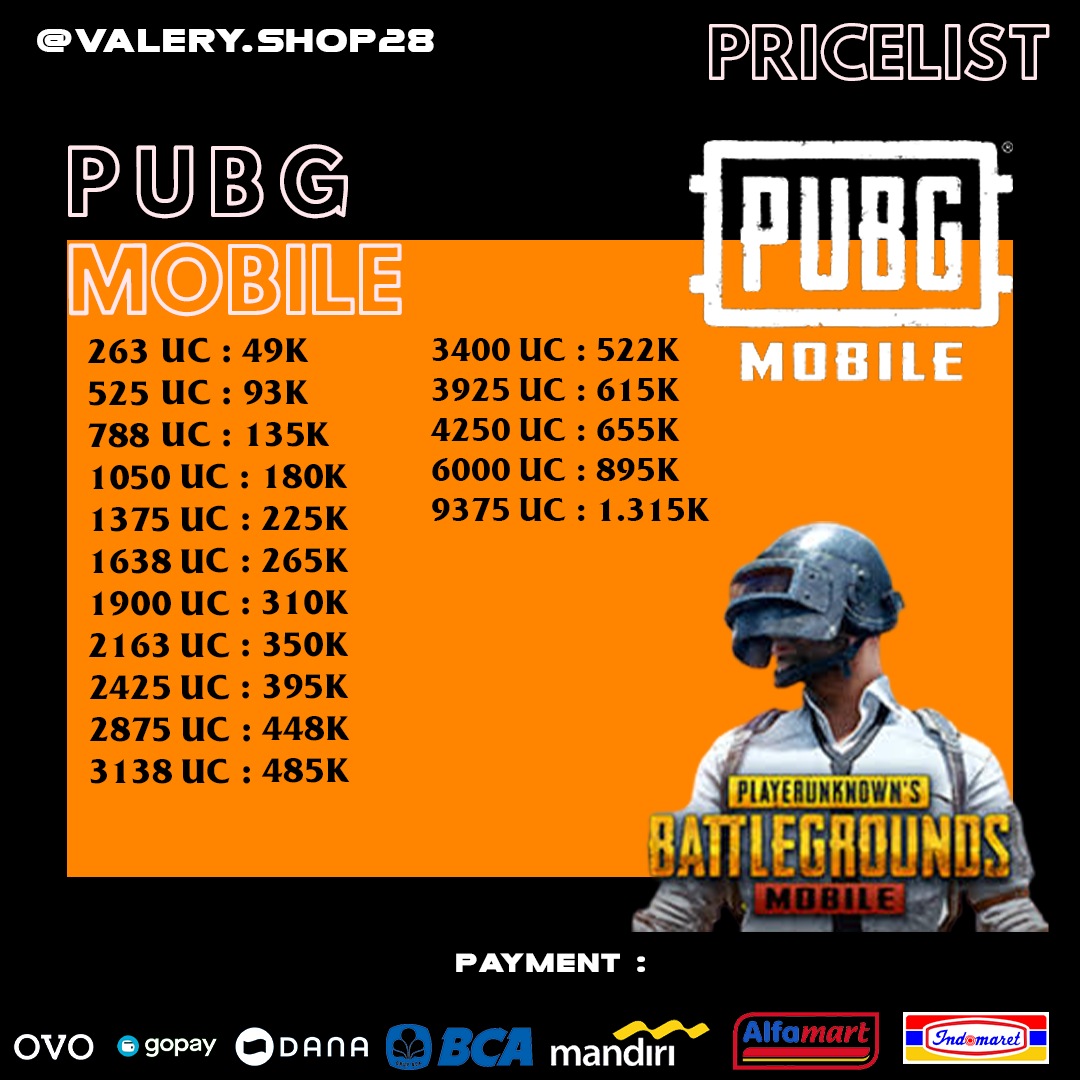
<style>
.page{position:relative;width:1080px;height:1080px;background:#000000}
.page>*{position:absolute;margin:0}
.t1{font:32.6px "MesaGrande";color:#ffffff}
.t2{font:63.6px "HussarEkologiczne1";color:#ffe7eb}
.t3{font:81.7px "HussarEkologiczne1";color:#ffe7eb}
.t4{font:35px "FrizQuadrataITCbyBT-Bold";color:#000000}
.t5{font:33.4px "FrizQuadrataITCbyBT-Bold";color:#000000}
.t6{font:26.2px "MesaGrande";color:#ffffff}
</style>
<div class="page">
<p class="t1" style="left:37px;top:29px;width:397px;height:23px">@valery.shop28</p>
<p class="t2" style="left:709px;top:23px;width:341px;height:58px">PRICELIST</p>
<p class="t3" style="left:68px;top:144px;width:334px;height:173px">P U B G<br>MOBILE</p>
<p class="t4" style="left:87px;top:337px;width:263px;height:447px">263 UC : 49K<br>525 UC : 93K<br>788 UC : 135K<br>1050 UC : 180K<br>1375 UC : 225K<br>1638 UC : 265K<br>1900 UC : 310K <br>2163 UC : 350K <br>2425 UC : 395K <br>2875 UC : 448K <br>3138 UC : 485K</p>
<p class="t5" style="left:430px;top:338px;width:280px;height:183px">3400 UC : 522K<br>3925 UC : 615K<br>4250 UC : 655K<br>6000 UC : 895K<br>9375 UC : 1.315K</p>
<p class="t6" style="left:456px;top:953px;width:189px;height:19px">PAYMENT :</p>
</div>
